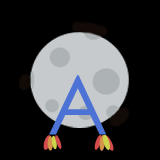
<style>
.page{position:relative;width:160px;height:160px;background:#000000}
.page>*{position:absolute;margin:0}
.t1{font:82px "CenturyGothic";color:#4b72d4}
</style>
<div class="page">
<p class="t1" style="left:49px;top:75px;width:58px;height:60px">A</p>
</div>
